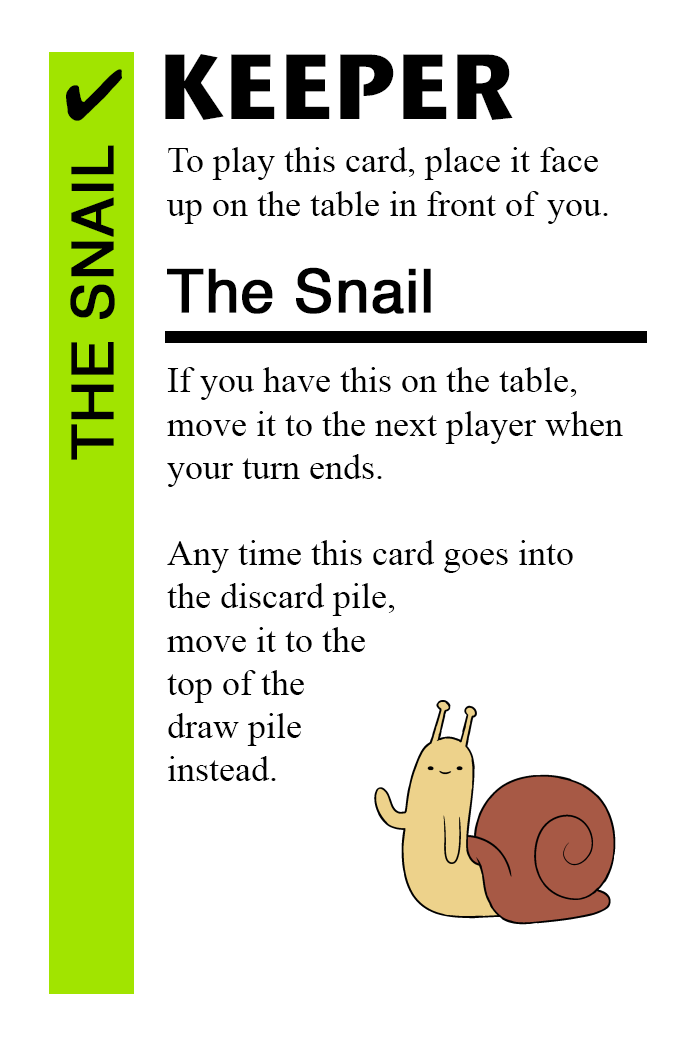
<style>
.page{position:relative;width:700px;height:1042px;background:#ffffff}
.page>*{position:absolute;margin:0}
.t1{font:92px "StoneSansITC-Bold";color:#000000}
.t2{font:72px "MS-Gothic";color:#000000}
.t3{font:58px "Helvetica";color:#000000;font-weight:bold}
.t4{font:36px "TimesNewRomanPSMT";color:#000000}
.t5{font:60px "Helvetica";color:#000000;font-weight:bold}
</style>
<div class="page">
<p class="t1" style="left:165px;top:54px;width:348px;height:66px">KEEPER</p>
<p class="t2" style="left:66px;top:69px;width:56px;height:52px">✔</p>
<p class="t3" style="left:70px;top:145px;width:45px;height:315px;rotate:-90deg">THE SNAIL</p>
<p class="t4" style="left:167px;top:147px;width:441px;height:77px">To play this card, place it face<br>up on the table in front of you.</p>
<p class="t5" style="left:167px;top:267px;width:264px;height:47px">The Snail</p>
<p class="t4" style="left:167px;top:367px;width:456px;height:414px">If you have this on the table,<br>move it to the next player when<br>your turn ends.<br><br>Any time this card goes into<br>the discard pile, <br>move it to the<br>top of the <br>draw pile <br>instead.</p>
</div>
